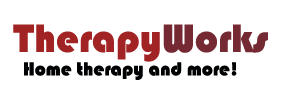
<style>
.page{position:relative;width:300px;height:90px;background:#ffffff}
.page>*{position:absolute;margin:0}
.t1{font:19.5px "Bauhaus93";color:#000102}
.t2{font:41px "Bauhaus93";color:#a22323}
.t3{font:41px "Bauhaus93";color:#752933}
</style>
<div class="page">
<p class="t1" style="left:13px;top:24px;width:255px;height:56px"><span class="t2">Therapy</span><span class="t3">Works<br></span>  Home therapy and more!</p>
</div>
